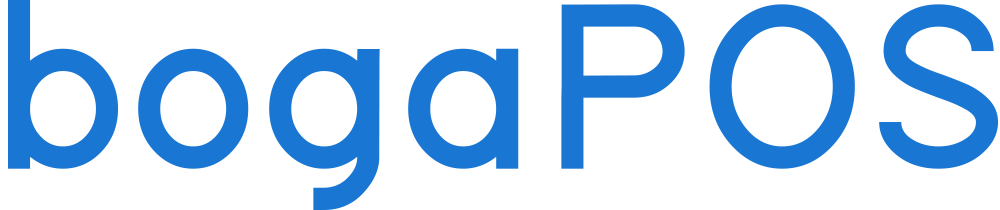
<style>
.page{position:relative;width:1000px;height:210px;background:#ffffff}
.page>*{position:absolute;margin:0}
.t1{font:222.4px "Elevationnormal";letter-spacing:0.075em;color:#1976d2}
</style>
<div class="page">
<p class="t1" style="left:8px;top:0px;width:990px;height:210px">bogaPOS</p>
</div>
